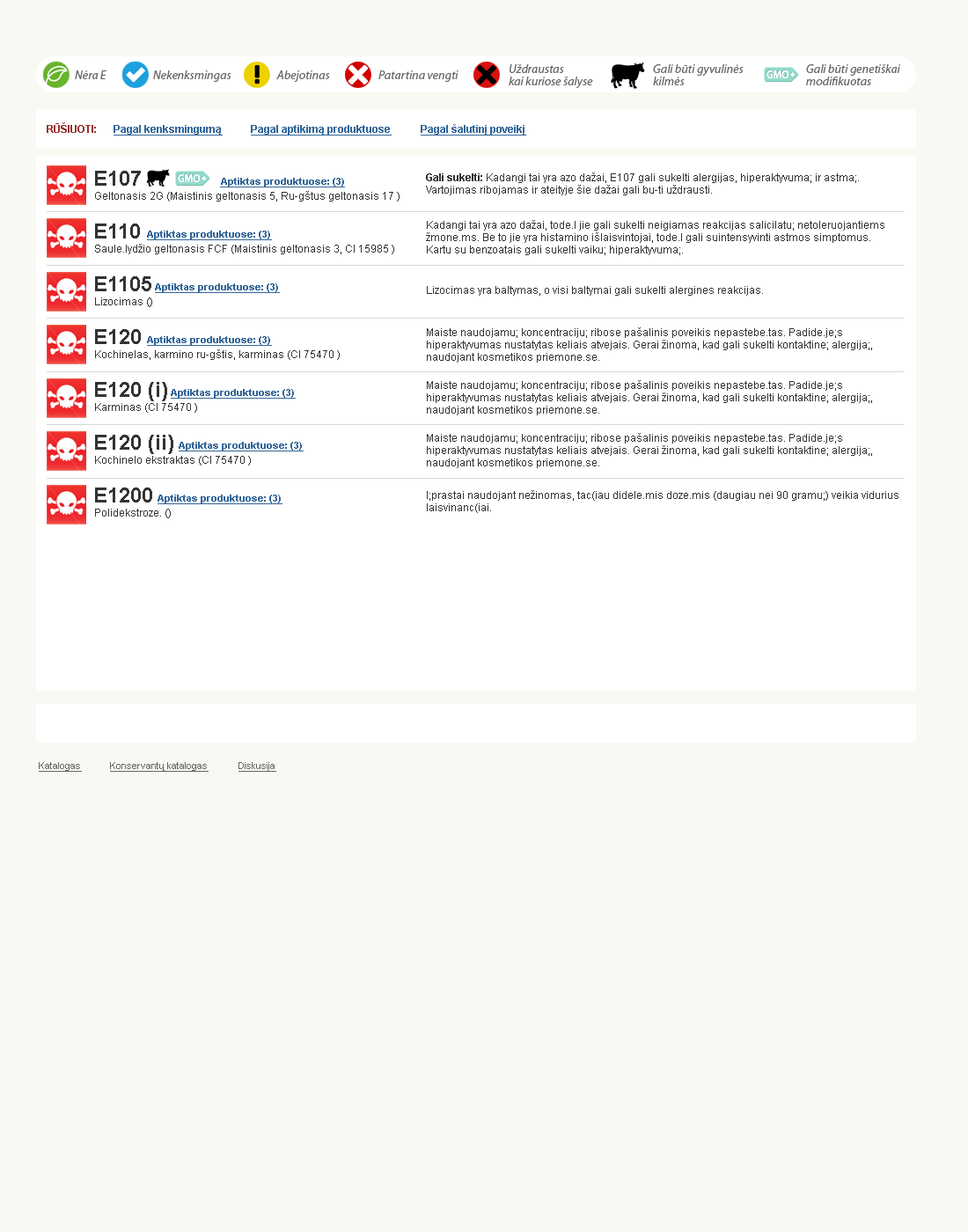
<style>
.page{position:relative;width:968px;height:1232px;background:#f9f9f4}
.page>*{position:absolute;margin:0}
.t1{font:12.3px/12.3px "MyriadPro-It";color:#666666}
.t2{font:12.3px "MyriadPro-It";color:#666666}
.t3{font:10.6px "Arial-BoldMT";color:#993333}
.t4{font:10.6px "Arial-BoldMT";color:#336699;text-decoration:underline}
.t5{font:21.1px/52.8px "Arial-BoldMT";color:#333333}
.t6{font:10.6px/12.3px "ArialMT";color:#333333}
.t7{font:10.6px/12.3px "Arial-BoldMT";color:#333333}
.t8{font:9.7px/52.8px "Arial-BoldMT";color:#336699;text-decoration:underline}
.t9{font:9.7px/52.8px "Arial-BoldMT";color:#336699}
.t10{font:9.7px "KozGoPro-Medium";color:#ffffff}
.t11{font:10.6px/52.8px "ArialMT";color:#333333}
.t12{font:10.6px "ArialMT";color:#333333}
.t13{font:9.7px "ArialMT";color:#666666;text-decoration:underline}
</style>
<div class="page">
<p class="t1" style="left:509px;top:64px;width:84px;height:25px">Uždraustas <br>kai kuriose šalyse</p>
<p class="t1" style="left:653px;top:64px;width:91px;height:21px">Gali būti gyvulinės<br>kilmės</p>
<p class="t1" style="left:806px;top:64px;width:94px;height:21px">Gali būti genetiškai<br>modifikuotas</p>
<p class="t2" style="left:75px;top:70px;width:31px;height:9px">Nėra E</p>
<p class="t2" style="left:153px;top:70px;width:78px;height:12px">Nekenksmingas</p>
<p class="t2" style="left:276px;top:70px;width:54px;height:12px">Abejotinas</p>
<p class="t2" style="left:378px;top:70px;width:80px;height:12px">Patartina vengti</p>
<p class="t3" style="left:47px;top:122px;width:49px;height:11px">RŪŠIUOTI:</p>
<p class="t4" style="left:114px;top:125px;width:109px;height:11px">Pagal kenksmingumą</p>
<p class="t4" style="left:251px;top:125px;width:141px;height:11px">Pagal aptikimą produktuose</p>
<p class="t4" style="left:421px;top:124px;width:105px;height:12px">Pagal šalutinį poveikį</p>
<p class="t5" style="left:95px;top:171px;width:78px;height:331px">E107<br>E110<br>E1105<br>E120<br>E120 (i)<br>E120 (ii)<br>E1200</p>
<p class="t6" style="left:426px;top:172px;width:433px;height:23px"><span class="t7">Gali sukelti:</span> Kadangi tai yra azo dažai, E107 gali sukelti alergijas, hiperaktyvuma; ir astma;. <br>Vartojimas ribojamas ir ateityje šie dažai gali bu-ti uždrausti.</p>
<p class="t8" style="left:147px;top:178px;width:198px;height:326px"><span class="t9">                            </span>Aptiktas produktuose: (3)<br>Aptiktas produktuose: (3)<br>   Aptiktas produktuose: (3)<br>Aptiktas produktuose: (3)<br>         Aptiktas produktuose: (3)<br>            Aptiktas produktuose: (3)<br>    Aptiktas produktuose: (3)</p>
<p class="t10" style="left:178px;top:174px;width:22px;height:8px">GMO</p>
<p class="t10" style="left:178px;top:174px;width:22px;height:8px">GMO</p>
<p class="t11" style="left:95px;top:191px;width:304px;height:327px">Geltonasis 2G (Maistinis geltonasis 5, Ru-gštus geltonasis 17 )  <br>Saule.lydžio geltonasis FCF (Maistinis geltonasis 3, CI 15985 ) <br>Lizocimas () <br>Kochinelas, karmino ru-gštis, karminas (CI 75470 ) <br>Karminas (CI 75470 ) <br>Kochinelo ekstraktas (CI 75470 ) <br>Polidekstroze. ()</p>
<p class="t6" style="left:426px;top:220px;width:458px;height:35px">Kadangi tai yra azo dažai, tode.l jie gali sukelti neigiamas reakcijas salicilatu; netoleruojantiems <br>žmone.ms. Be to jie yra histamino išlaisvintojai, tode.l gali suintensyvinti astmos simptomus. <br>Kartu su benzoatais gali sukelti vaiku; hiperaktyvuma;.</p>
<p class="t12" style="left:427px;top:286px;width:336px;height:10px">Lizocimas yra baltymas, o visi baltymai gali sukelti alergines reakcijas.</p>
<p class="t6" style="left:427px;top:327px;width:445px;height:36px">Maiste naudojamu; koncentraciju; ribose pašalinis poveikis nepastebe.tas. Padide.je;s <br>hiperaktyvumas nustatytas keliais atvejais. Gerai žinoma, kad gali sukelti kontaktine; alergija;, <br>naudojant kosmetikos priemone.se.</p>
<p class="t6" style="left:427px;top:380px;width:445px;height:35px">Maiste naudojamu; koncentraciju; ribose pašalinis poveikis nepastebe.tas. Padide.je;s <br>hiperaktyvumas nustatytas keliais atvejais. Gerai žinoma, kad gali sukelti kontaktine; alergija;, <br>naudojant kosmetikos priemone.se.</p>
<p class="t6" style="left:427px;top:433px;width:445px;height:35px">Maiste naudojamu; koncentraciju; ribose pašalinis poveikis nepastebe.tas. Padide.je;s <br>hiperaktyvumas nustatytas keliais atvejais. Gerai žinoma, kad gali sukelti kontaktine; alergija;, <br>naudojant kosmetikos priemone.se.</p>
<p class="t6" style="left:427px;top:490px;width:471px;height:23px">I;prastai naudojant nežinomas, tac(iau didele.mis doze.mis (daugiau nei 90 gramu;) veikia vidurius <br>laisvinanc(iai.</p>
<p class="t13" style="left:39px;top:762px;width:43px;height:10px">Katalogas</p>
<p class="t13" style="left:110px;top:762px;width:99px;height:10px">Konservantų katalogas</p>
<p class="t13" style="left:238px;top:762px;width:38px;height:10px">Diskusija</p>
</div>
